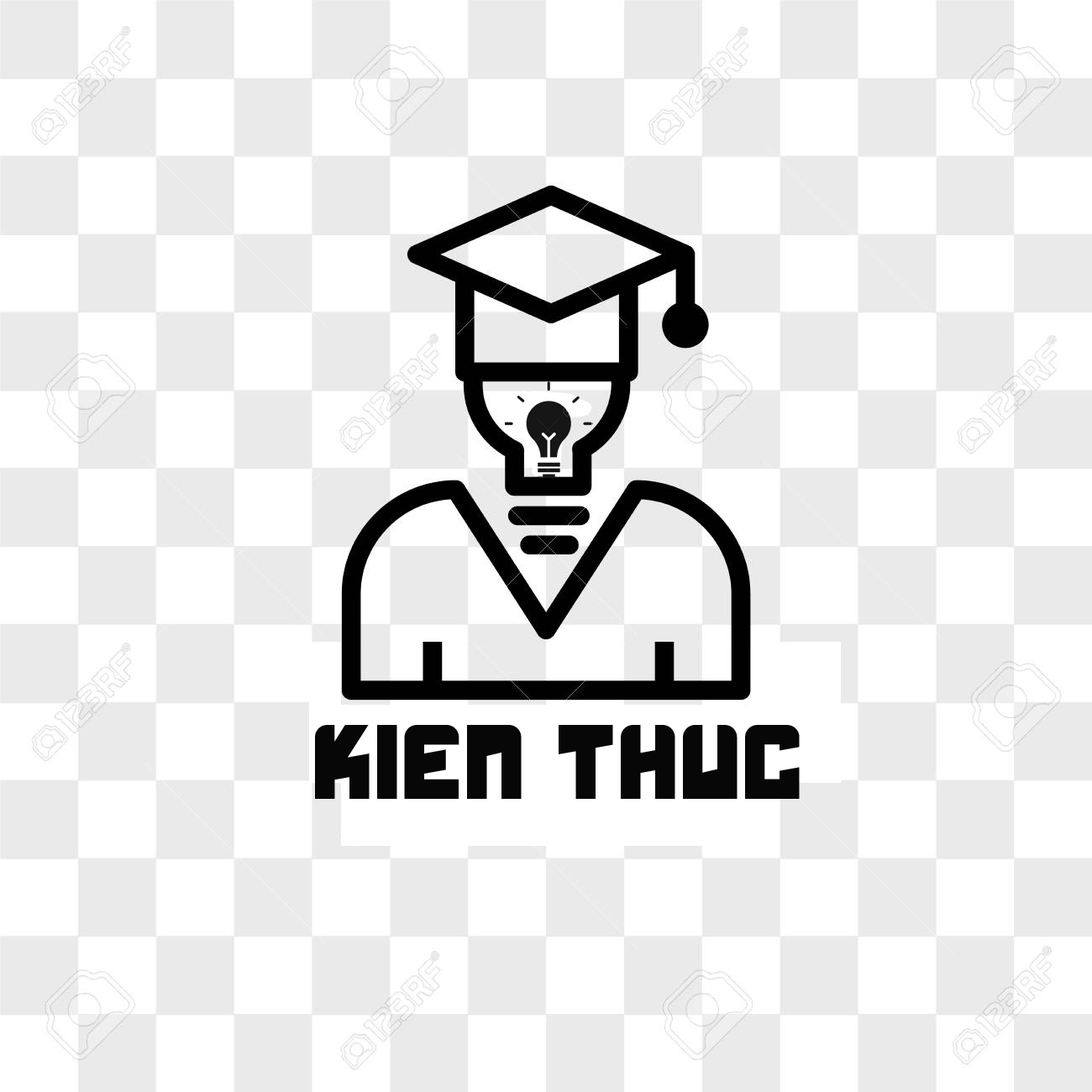
<style>
.page{position:relative;width:1092px;height:1092px;background:#ffffff}
.page>*{position:absolute;margin:0}
.t1{font:84px "Boldhead";color:#070707}
</style>
<div class="page">
<p class="t1" style="left:315px;top:725px;width:485px;height:74px">kien thuc</p>
</div>
